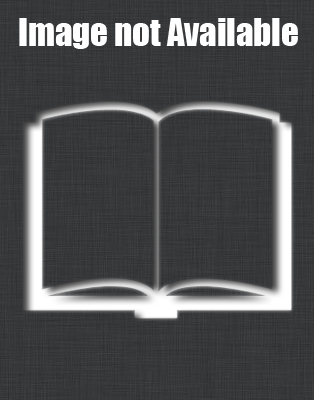
<style>
.page{position:relative;width:314px;height:400px}
.page>*{position:absolute;margin:0}
.t1{font:34.7px "Impact";color:#ffffff}
</style>
<div class="page">
<p class="t1" style="left:19px;top:18px;width:279px;height:31px">Image not Available</p>
</div>
